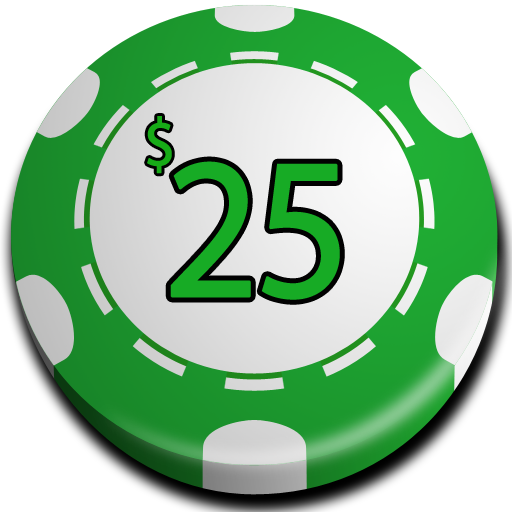
<style>
.page{position:relative;width:512px;height:512px;background:#ffffff}
.page>*{position:absolute;margin:0}
.t1{font:117.9px "MyriadPro-Regular";letter-spacing:-0.05em;color:#17ab17;font-variant:small-caps;font-weight:bold;scale:0.92 1}
.t2{font:346.9px "MyriadPro-Regular";letter-spacing:-0.05em;color:#17ab25;font-variant:small-caps;font-weight:bold;scale:0.92 1}
</style>
<div class="page">
<p class="t1" style="left:147px;top:116px;width:25px;height:58px">$</p>
<p class="t2" style="left:170px;top:161px;width:170px;height:139px">25</p>
</div>
